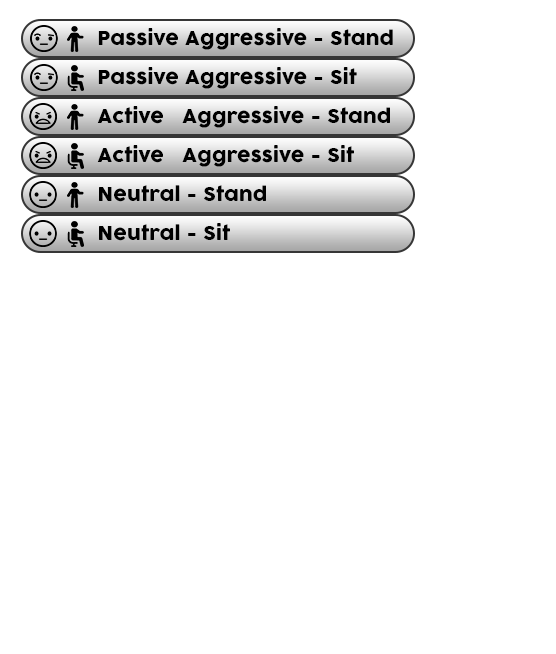
<style>
.page{position:relative;width:556px;height:654px;background:#ffffff}
.page>*{position:absolute;margin:0}
.t1{font:19.2px "COCOGOOSE";color:#000000}
</style>
<div class="page">
<p class="t1" style="left:98px;top:28px;width:295px;height:22px">Passive Aggressive - Stand</p>
<p class="t1" style="left:98px;top:67px;width:259px;height:22px">Passive Aggressive - Sit</p>
<p class="t1" style="left:97px;top:106px;width:293px;height:22px">Active   Aggressive - Stand</p>
<p class="t1" style="left:97px;top:145px;width:257px;height:22px">Active   Aggressive - Sit</p>
<p class="t1" style="left:99px;top:185px;width:167px;height:17px">Neutral - Stand</p>
<p class="t1" style="left:99px;top:223px;width:131px;height:18px">Neutral - Sit</p>
</div>
